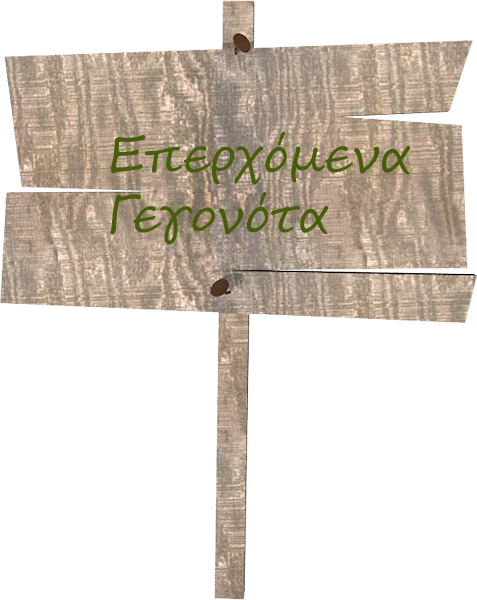
<style>
.page{position:relative;width:477px;height:600px;background:#ffffff}
.page>*{position:absolute;margin:0}
.t1{font:50px "SegoeScript";color:#465e0a}
</style>
<div class="page">
<p class="t1" style="left:110px;top:132px;width:300px;height:113px">Επερχόμενα<br>Γεγονότα</p>
</div>
